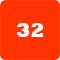
<style>
.page{position:relative;width:60px;height:60px;background:#ff3200}
.page>*{position:absolute;margin:0}
.t1{font:20.8px "Rockwell-ExtraBold";color:#ffffff}
</style>
<div class="page">
<p class="t1" style="left:16px;top:23px;width:28px;height:14px">32</p>
</div>
